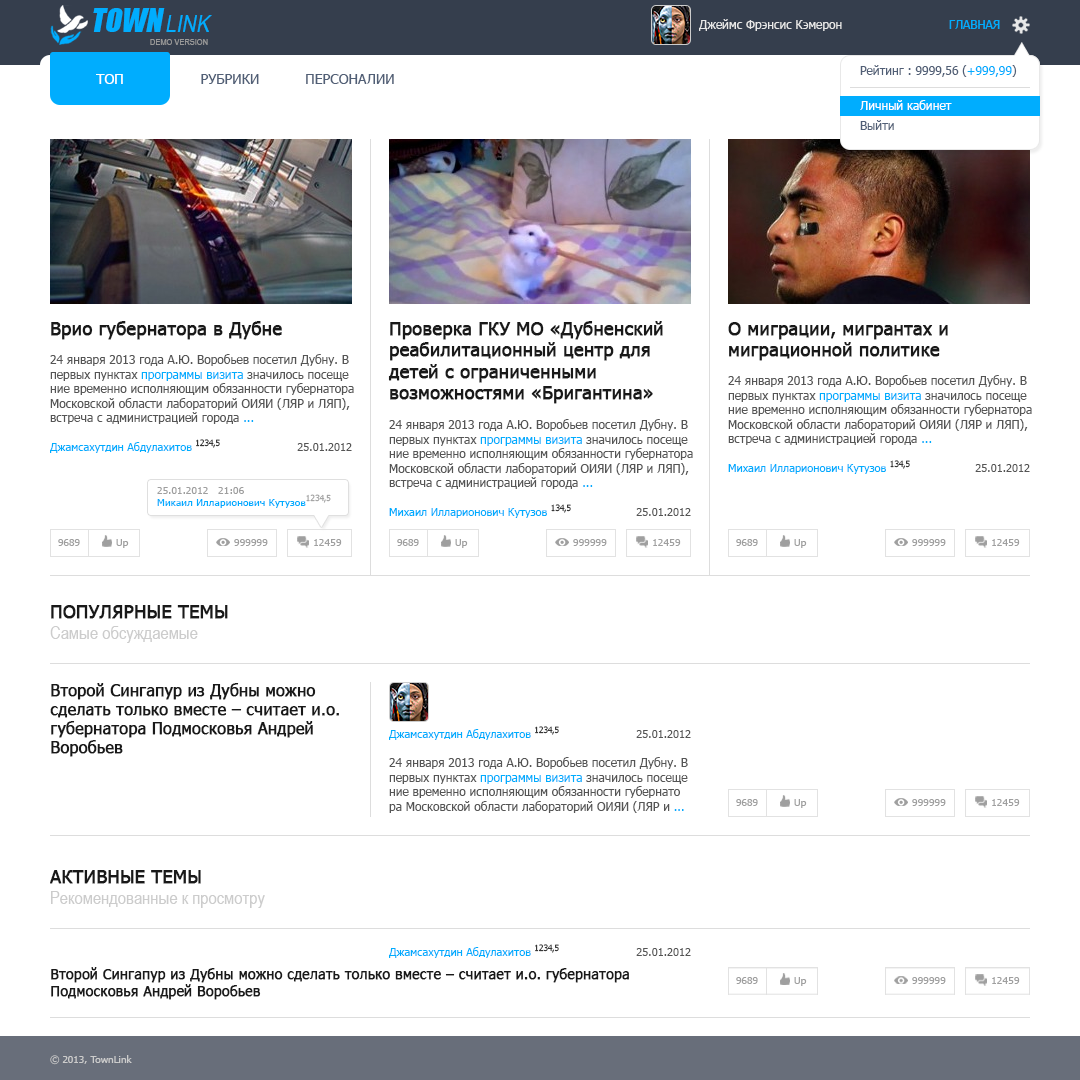
<style>
.page{position:relative;width:1080px;height:1080px;background:#ffffff}
.page>*{position:absolute;margin:0}
.t1{font:30px "Impact";color:#00adfe;font-style:italic}
.t2{font:23.9px "ArialNarrow";color:#00adfe;font-style:italic}
.t3{font:12px "Tahoma";color:#e8e8e8}
.t4{font:12px "Tahoma";color:#00adfe}
.t5{font:9px "ArialNarrow";color:#999999}
.t6{font:12px "Tahoma";color:#515f76}
.t7{font:12px/20px "Tahoma";color:#ffffff}
.t8{font:12px/20px "Tahoma";color:#515f76}
.t9{font:14px "Tahoma";color:#ffffff}
.t10{font:14px "Tahoma";color:#515f76}
.t11{font:18px "Tahoma";color:#191919;font-weight:bold}
.t12{font:12px "Tahoma";color:#555555}
.t13{font:11.3px "Tahoma";color:#00adfe;scale:0.97 1}
.t14{font:14.4px "Tahoma";color:#191919;scale:0.97 1}
.t15{font:11.3px "Tahoma";color:#555555;scale:0.97 1}
.t16{font:10.2px/12px "Tahoma";color:#00adfe}
.t17{font:10.2px/12px "Tahoma";color:#9f9f9f}
.t18{font:14px/12px "Tahoma";color:#9f9f9f}
.t19{font:10px "Tahoma";color:#9f9f9f}
.t20{font:9.8px "Tahoma";color:#9f9f9f;scale:1.04 1}
.t21{font:10.2px "Tahoma";color:#9f9f9f}
.t22{font:18px "ArialNarrow";color:#cccccc}
.t23{font:16px "Tahoma";color:#191919;font-weight:bold}
.t24{font:14px "Tahoma";color:#191919;font-weight:bold}
.t25{font:9.9px "Tahoma";color:#9f9f9f}
.t26{font:9.7px "Tahoma";color:#9f9f9f;scale:1.05 1}
.t27{font:10px "Tahoma";color:#9f9f9f;scale:1.04 1}
.t28{font:10px "Tahoma";color:#cccccc}
</style>
<div class="page">
<p class="t1" style="left:93px;top:8px;width:72px;height:24px">TOWN</p>
<p class="t2" style="left:166px;top:15px;width:46px;height:17px">LINK</p>
<p class="t3" style="left:699px;top:19px;width:143px;height:12px">Джеймс Фрэнсис Кэмерон</p>
<p class="t4" style="left:949px;top:20px;width:51px;height:9px">ГЛАВНАЯ</p>
<p class="t5" style="left:150px;top:39px;width:58px;height:6px">DEMO VERSION</p>
<p class="t6" style="left:860px;top:65px;width:157px;height:65px">Рейтинг : 9999,56 (<span class="t4">+999,99</span>)<br><br><span class="t7">Личный кабинет<br></span><span class="t8">Выйти</span></p>
<p class="t9" style="left:96px;top:74px;width:27px;height:10px">ТОП</p>
<p class="t10" style="left:201px;top:74px;width:58px;height:10px">РУБРИКИ</p>
<p class="t10" style="left:306px;top:74px;width:88px;height:10px">ПЕРСОНАЛИИ</p>
<p class="t11" style="left:51px;top:321px;width:231px;height:19px">Врио губернатора в Дубне</p>
<p class="t11" style="left:388px;top:321px;width:275px;height:83px">Проверка ГКУ МО «Дубненский<br>реабилитационный центр для<br>детей с ограниченными<br>возможностями «Бригантина»</p>
<p class="t11" style="left:728px;top:322px;width:220px;height:39px">О миграции, мигрантах и<br>миграционной политике</p>
<p class="t12" style="left:50px;top:354px;width:304px;height:70px">24 января 2013 года А.Ю. Воробьев посетил Дубну. В<br>первых пунктах <span class="t4">программы визита</span> значилось посеще<br>ние временно исполняющим обязанности губернатора<br>Московской области лабораторий ОИЯИ (ЛЯР и ЛЯП),<br>встреча с администрацией города <span class="t4">...</span></p>
<p class="t12" style="left:728px;top:375px;width:304px;height:70px">24 января 2013 года А.Ю. Воробьев посетил Дубну. В<br>первых пунктах <span class="t4">программы визита</span> значилось посеще<br>ние временно исполняющим обязанности губернатора<br>Московской области лабораторий ОИЯИ (ЛЯР и ЛЯП),<br>встреча с администрацией города <span class="t4">...</span></p>
<p class="t12" style="left:389px;top:419px;width:304px;height:70px">24 января 2013 года А.Ю. Воробьев посетил Дубну. В<br>первых пунктах <span class="t4">программы визита</span> значилось посеще<br>ние временно исполняющим обязанности губернатора<br>Московской области лабораторий ОИЯИ (ЛЯР и ЛЯП),<br>встреча с администрацией города <span class="t4">...</span></p>
<p class="t13" style="left:50px;top:439px;width:170px;height:14px">Джамсахутдин Абдулахитов <span class="t14">1234,5</span></p>
<p class="t15" style="left:297px;top:443px;width:55px;height:8px">25.01.2012</p>
<p class="t13" style="left:728px;top:460px;width:182px;height:14px">Михаил Илларионович Кутузов <span class="t14">134,5</span></p>
<p class="t15" style="left:975px;top:464px;width:55px;height:8px">25.01.2012</p>
<p class="t16" style="left:157px;top:487px;width:174px;height:21px"><span class="t17">25.01.2012   21:06<br></span>Микаил Илларионович Кутузов<span class="t18">1234,5</span></p>
<p class="t13" style="left:389px;top:504px;width:182px;height:14px">Михаил Илларионович Кутузов <span class="t14">134,5</span></p>
<p class="t15" style="left:636px;top:508px;width:55px;height:8px">25.01.2012</p>
<p class="t19" style="left:58px;top:539px;width:22px;height:7px">9689</p>
<p class="t20" style="left:116px;top:539px;width:13px;height:9px">Up</p>
<p class="t21" style="left:234px;top:539px;width:34px;height:7px">999999</p>
<p class="t21" style="left:314px;top:539px;width:28px;height:7px">12459</p>
<p class="t19" style="left:397px;top:539px;width:22px;height:7px">9689</p>
<p class="t20" style="left:455px;top:539px;width:13px;height:9px">Up</p>
<p class="t21" style="left:573px;top:539px;width:34px;height:7px">999999</p>
<p class="t21" style="left:653px;top:539px;width:28px;height:7px">12459</p>
<p class="t19" style="left:736px;top:539px;width:22px;height:7px">9689</p>
<p class="t20" style="left:794px;top:539px;width:13px;height:9px">Up</p>
<p class="t21" style="left:912px;top:539px;width:34px;height:7px">999999</p>
<p class="t21" style="left:992px;top:539px;width:28px;height:7px">12459</p>
<p class="t22" style="left:50px;top:605px;width:178px;height:38px"><span class="t11">ПОПУЛЯРНЫЕ ТЕМЫ<br></span>Самые обсуждаемые</p>
<p class="t23" style="left:50px;top:683px;width:289px;height:74px">Второй Сингапур из Дубны можно<br>сделать только вместе – считает и.о.<br>губернатора Подмосковья Андрей<br>Воробьев</p>
<p class="t13" style="left:389px;top:726px;width:170px;height:14px">Джамсахутдин Абдулахитов <span class="t14">1234,5</span></p>
<p class="t15" style="left:636px;top:730px;width:55px;height:8px">25.01.2012</p>
<p class="t12" style="left:389px;top:757px;width:299px;height:56px">24 января 2013 года А.Ю. Воробьев посетил Дубну. В <br>первых пунктах <span class="t4">программы визита</span> значилось посеще<br>ние временно исполняющим обязанности губернато<br>ра Московской области лабораторий ОИЯИ (ЛЯР и <span class="t4">...</span></p>
<p class="t19" style="left:736px;top:799px;width:22px;height:7px">9689</p>
<p class="t20" style="left:794px;top:799px;width:13px;height:9px">Up</p>
<p class="t21" style="left:912px;top:799px;width:34px;height:7px">999999</p>
<p class="t21" style="left:992px;top:799px;width:28px;height:7px">12459</p>
<p class="t22" style="left:50px;top:870px;width:215px;height:38px"><span class="t11">АКТИВНЫЕ ТЕМЫ<br></span>Рекомендованные к просмотру</p>
<p class="t13" style="left:389px;top:944px;width:170px;height:14px">Джамсахутдин Абдулахитов <span class="t14">1234,5</span></p>
<p class="t15" style="left:636px;top:948px;width:55px;height:8px">25.01.2012</p>
<p class="t24" style="left:51px;top:967px;width:578px;height:33px">Второй Сингапур из Дубны можно сделать только вместе – считает и.о. губернатора<br>Подмосковья Андрей Воробьев</p>
<p class="t25" style="left:736px;top:977px;width:22px;height:7px">9689</p>
<p class="t26" style="left:794px;top:977px;width:13px;height:9px">Up</p>
<p class="t19" style="left:912px;top:977px;width:34px;height:7px">999999</p>
<p class="t27" style="left:992px;top:977px;width:28px;height:7px">12459</p>
<p class="t28" style="left:50px;top:1055px;width:82px;height:10px">© 2013, TownLink</p>
</div>
